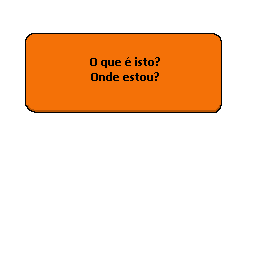
<style>
.page{position:relative;width:256px;height:256px;background:#ffffff}
.page>*{position:absolute;margin:0}
.t1{font:12.5px "Calibri-Bold";color:#000000}
</style>
<div class="page">
<p class="t1" style="left:90px;top:57px;width:70px;height:24px;text-align:center">O que é isto?<br>Onde estou?</p>
</div>
